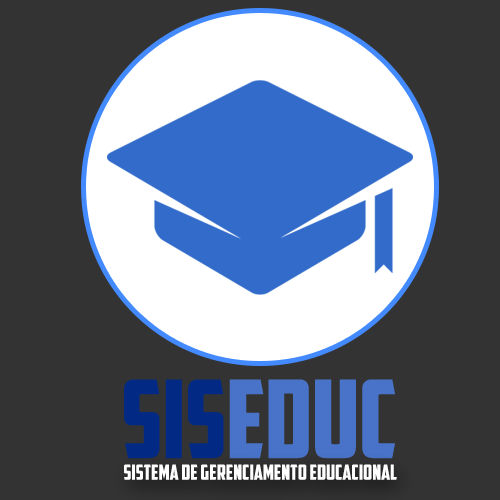
<style>
.page{position:relative;width:500px;height:500px;background:#333333}
.page>*{position:absolute;margin:0}
.t1{font:108.3px "AmericanCaptain";color:#4973c9}
.t2{font:108.3px "AmericanCaptain";color:#022a85}
.t3{font:20.9px "AmericanCaptain";color:#ffffff}
</style>
<div class="page">
<p class="t1" style="left:124px;top:379px;width:271px;height:80px"><span class="t2">SIS</span>EDUC</p>
<p class="t3" style="left:124px;top:464px;width:273px;height:16px">SISTEMA DE GERENCIAMENTO EDUCACIONAL</p>
</div>
